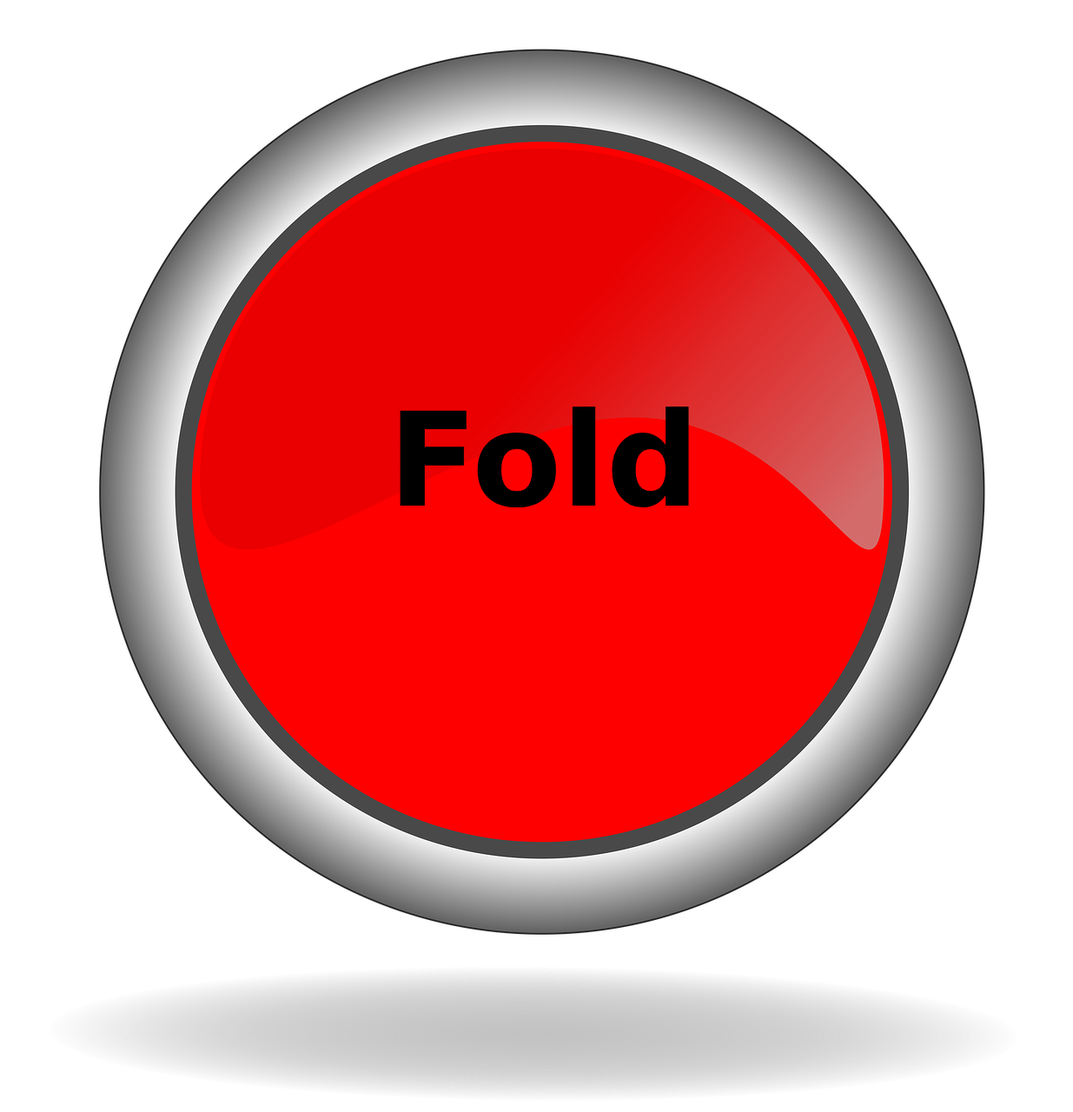
<style>
.page{position:relative;width:1073px;height:1112px;background:#ffffff}
.page>*{position:absolute;margin:0}
.t1{font:130.3px "DejaVuSans-Bold";color:#000000}
</style>
<div class="page">
<p class="t1" style="left:400px;top:406px;width:289px;height:102px">Fold</p>
</div>
